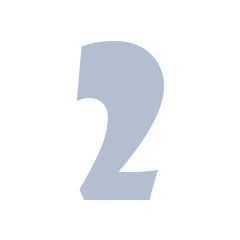
<style>
.page{position:relative;width:240px;height:240px;background:#ffffff}
.page>*{position:absolute;margin:0}
.t1{font:208.3px "ShowcardGothic-Reg";color:#b3bed1}
</style>
<div class="page">
<p class="t1" style="left:76px;top:41px;width:88px;height:159px">2</p>
</div>
